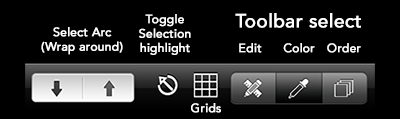
<style>
.page{position:relative;width:400px;height:119px;background:#000000}
.page>*{position:absolute;margin:0}
.t1{font:12px "Avenir-Medium";color:#ffffff;font-weight:bold}
.t2{font:19px "Avenir-Medium";color:#ffffff;font-weight:bold}
</style>
<div class="page">
<p class="t1" style="left:139px;top:14px;width:52px;height:41px;text-align:center">Toggle<br>Selection<br>highlight</p>
<p class="t2" style="left:235px;top:13px;width:126px;height:15px">Toolbar select</p>
<p class="t1" style="left:41px;top:27px;width:82px;height:28px;text-align:center">Select Arc<br>(Wrap around)</p>
<p class="t1" style="left:239px;top:43px;width:23px;height:10px">Edit</p>
<p class="t1" style="left:283px;top:43px;width:32px;height:10px">Color</p>
<p class="t1" style="left:327px;top:43px;width:34px;height:10px">Order</p>
<p class="t1" style="left:191px;top:103px;width:30px;height:10px">Grids</p>
</div>
